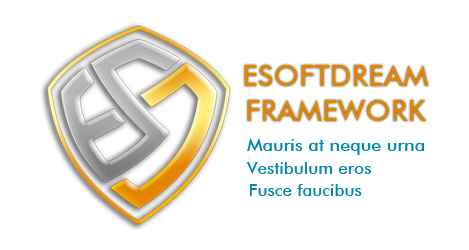
<style>
.page{position:relative;width:469px;height:250px;background:#ffffff}
.page>*{position:absolute;margin:0}
.t1{font:29.5px "FuturaBT-Medium";color:#e28502}
.t2{font:18px "FuturaBT-Medium";color:#0087b3}
.t3{font:17px "FuturaBT-Medium";color:#0087b3}
</style>
<div class="page">
<p class="t1" style="left:244px;top:65px;width:185px;height:56px;text-align:center">ESOFTDREAM<br>FRAMEWORK</p>
<p class="t2" style="left:247px;top:138px;width:178px;height:17px">Mauris at neque urna</p>
<p class="t3" style="left:246px;top:162px;width:126px;height:12px">Vestibulum eros</p>
<p class="t3" style="left:249px;top:184px;width:113px;height:12px">Fusce faucibus</p>
</div>
